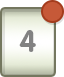
<style>
.page{position:relative;width:64px;height:77px}
.page>*{position:absolute;margin:0}
.t1{font:30px "RotondaC-Bold";letter-spacing:0.04em;color:#828282;text-transform:uppercase}
</style>
<div class="page">
<p class="t1" style="left:19px;top:30px;width:17px;height:22px">4</p>
</div>
